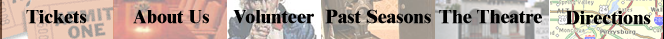
<style>
.page{position:relative;width:664px;height:39px}
.page>*{position:absolute;margin:0}
.t1{font:19px "TimesNewRomanMT-ExtraBold";color:#000000}
</style>
<div class="page">
<p class="t1" style="left:26px;top:10px;width:61px;height:14px">Tickets</p>
<p class="t1" style="left:133px;top:10px;width:76px;height:14px">About Us</p>
<p class="t1" style="left:233px;top:10px;width:81px;height:14px">Volunteer</p>
<p class="t1" style="left:325px;top:10px;width:111px;height:20px">Past Seasons</p>
<p class="t1" style="left:439px;top:10px;width:103px;height:14px">The Theatre</p>
<p class="t1" style="left:565px;top:11px;width:86px;height:14px">Directions</p>
</div>
